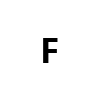
<style>
.page{position:relative;width:100px;height:100px;background:#ffffff}
.page>*{position:absolute;margin:0}
.t1{font:35px "OpenSans-Bold";color:#000000}
</style>
<div class="page">
<p class="t1" style="left:43px;top:38px;width:15px;height:25px">F</p>
</div>
